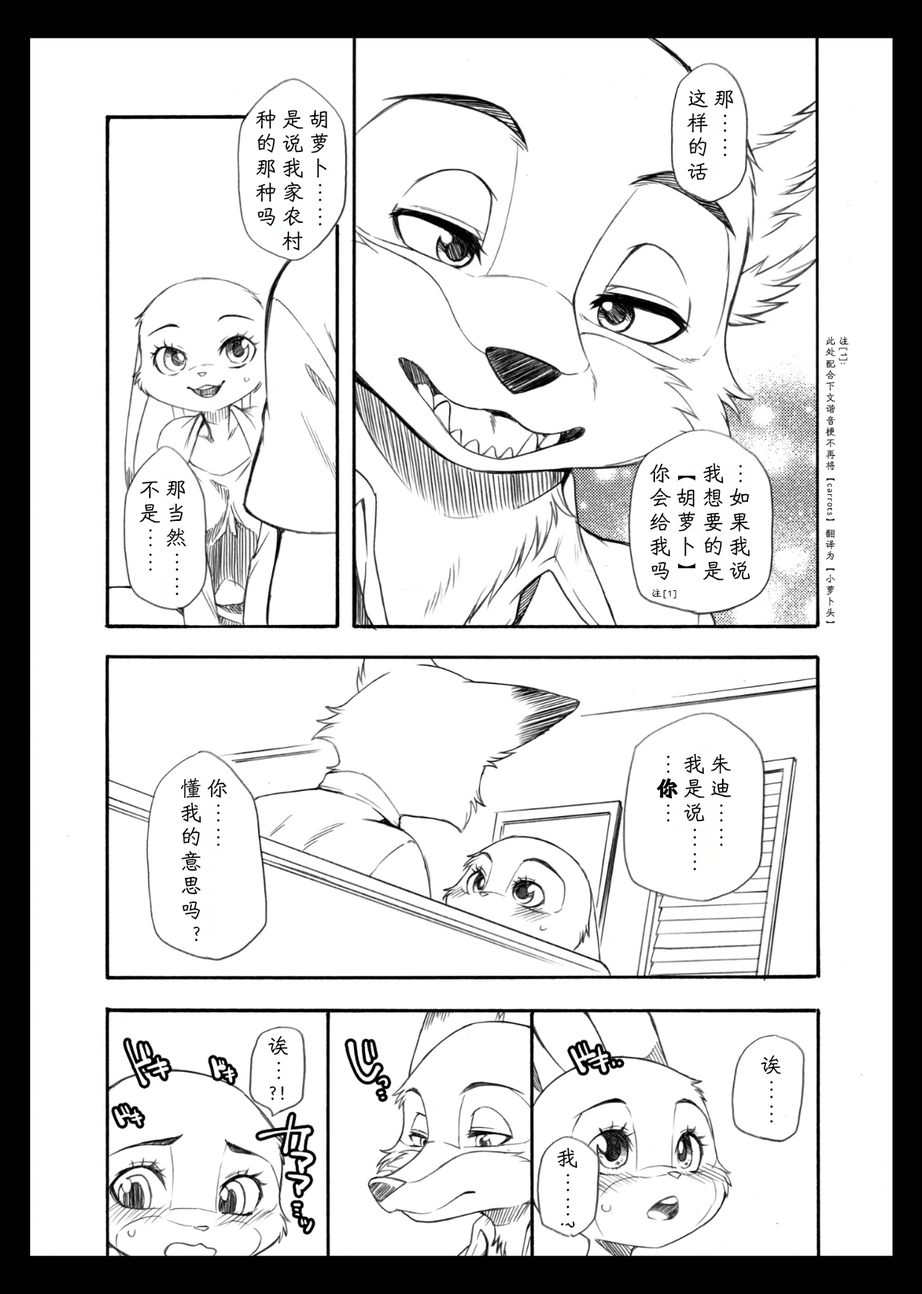
<style>
.page{position:relative;width:922px;height:1294px;background:#ffffff}
.page>*{position:absolute;margin:0}
.t1{font:22.1px/26.5px "HYShiWei55U";letter-spacing:0.1em;color:#000000}
.t2{font:10.3px/13.3px "HYShiWei55U";letter-spacing:0.1em;color:#000000}
.t3{font:10.3px "HYShiWei55U";letter-spacing:0.1em;color:#000000}
.t4{font:22.1px/26.5px "HYShiWei75U";letter-spacing:0.1em;color:#000000;font-weight:bold}
.t5{font:22.1px "HYShiWei55U";letter-spacing:0.1em;color:#000000}
</style>
<div class="page">
<p class="t1" style="left:687px;top:88px;width:46px;height:92px">那……<br>这样的话</p>
<p class="t1" style="left:255px;top:109px;width:73px;height:142px">胡萝卜……<br>是说我家农村<br>种的那种吗</p>
<p class="t2" style="left:825px;top:336px;width:24px;height:287px">注[1]:<br>此处配合下文谐音梗不再将【carrots】翻译为【小萝卜头】</p>
<p class="t1" style="left:650px;top:462px;width:100px;height:118px">…如果我说<br>我想要的是<br>【胡萝卜】<br>你会给我吗</p>
<p class="t1" style="left:139px;top:480px;width:48px;height:115px">那当然……<br>不是……</p>
<p class="t3" style="left:652px;top:589px;width:24px;height:10px">注[1]</p>
<p class="t1" style="left:656px;top:753px;width:75px;height:117px">朱迪……<br>我是说……<br>…<span class="t4">你</span>…</p>
<p class="t1" style="left:181px;top:777px;width:46px;height:164px">你……<br>懂我的意思吗？</p>
<p class="t1" style="left:268px;top:1035px;width:20px;height:44px">诶…</p>
<p class="t1" style="left:760px;top:1055px;width:21px;height:67px">诶……</p>
<p class="t5" style="left:269px;top:1086px;width:15px;height:14px">?!</p>
<p class="t1" style="left:557px;top:1147px;width:20px;height:80px">我……?</p>
</div>
